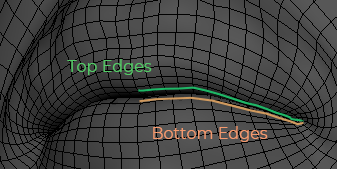
<style>
.page{position:relative;width:337px;height:169px}
.page>*{position:absolute;margin:0}
.t1{font:16px "Montserrat-Regular";color:#54c967}
.t2{font:16px "Montserrat-Regular";color:#f59a6e}
</style>
<div class="page">
<p class="t1" style="left:67px;top:59px;width:85px;height:16px">Top Edges</p>
<p class="t2" style="left:153px;top:126px;width:115px;height:16px">Bottom Edges</p>
</div>
